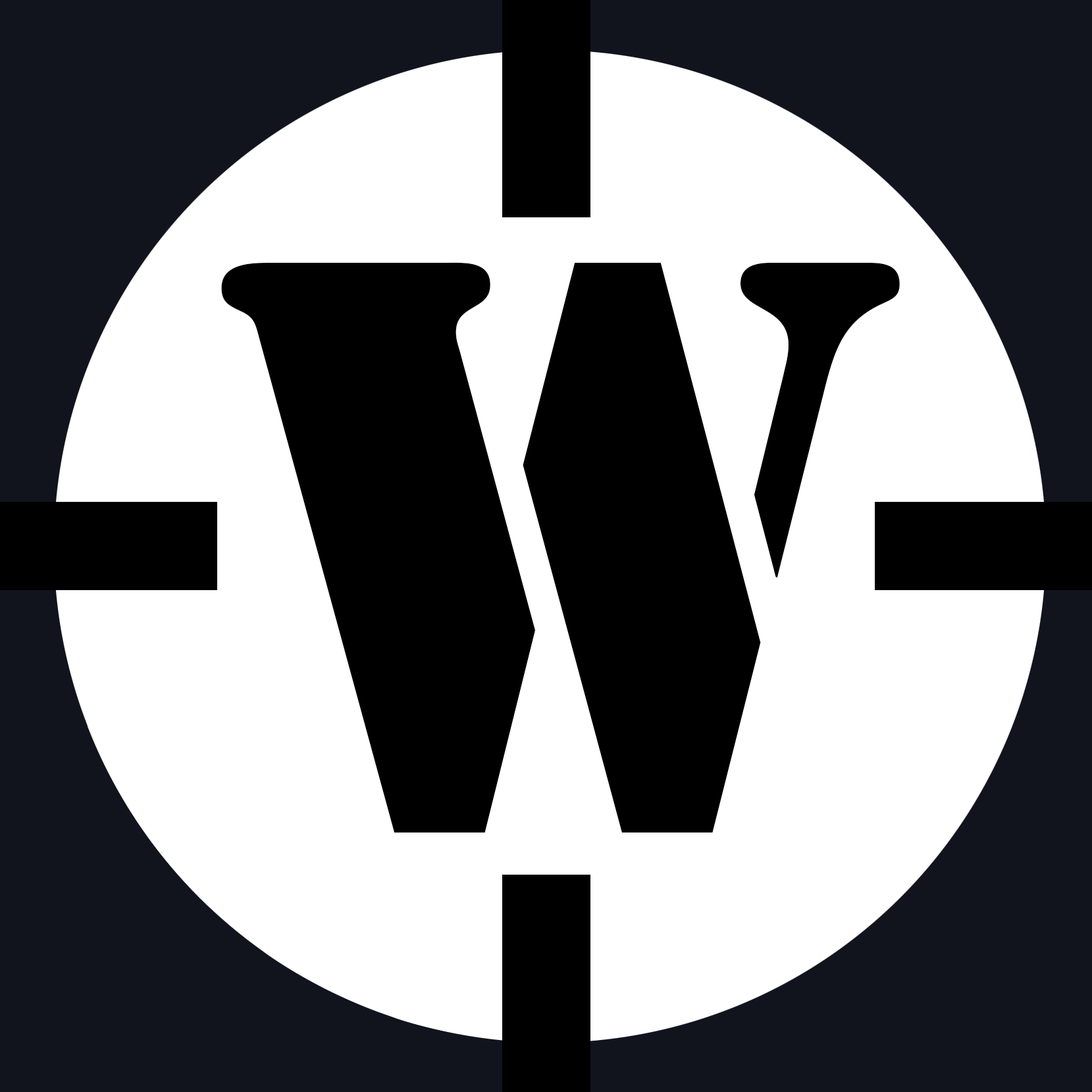
<style>
.page{position:relative;width:1092px;height:1092px;background:#ffffff}
.page>*{position:absolute;margin:0}
.t1{font:761.5px "StencilStd";color:#000000}
</style>
<div class="page">
<p class="t1" style="left:221px;top:262px;width:679px;height:570px">W</p>
</div>
